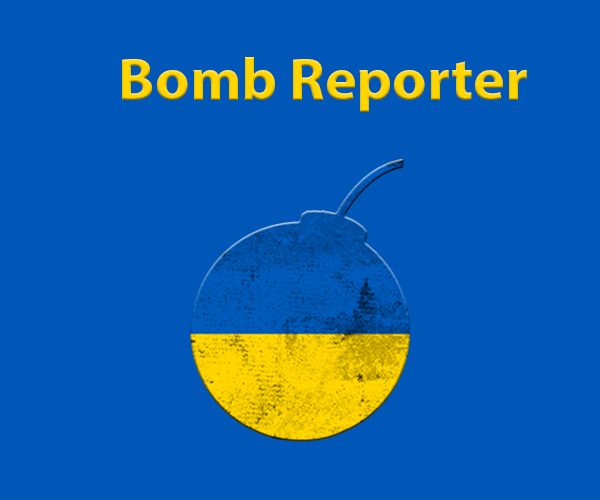
<style>
.page{position:relative;width:600px;height:500px;background:#0057b7}
.page>*{position:absolute;margin:0}
.t1{font:60px "MyriadPro-Bold";color:#ffd500}
</style>
<div class="page">
<p class="t1" style="left:122px;top:57px;width:405px;height:55px">Bomb Reporter</p>
</div>
